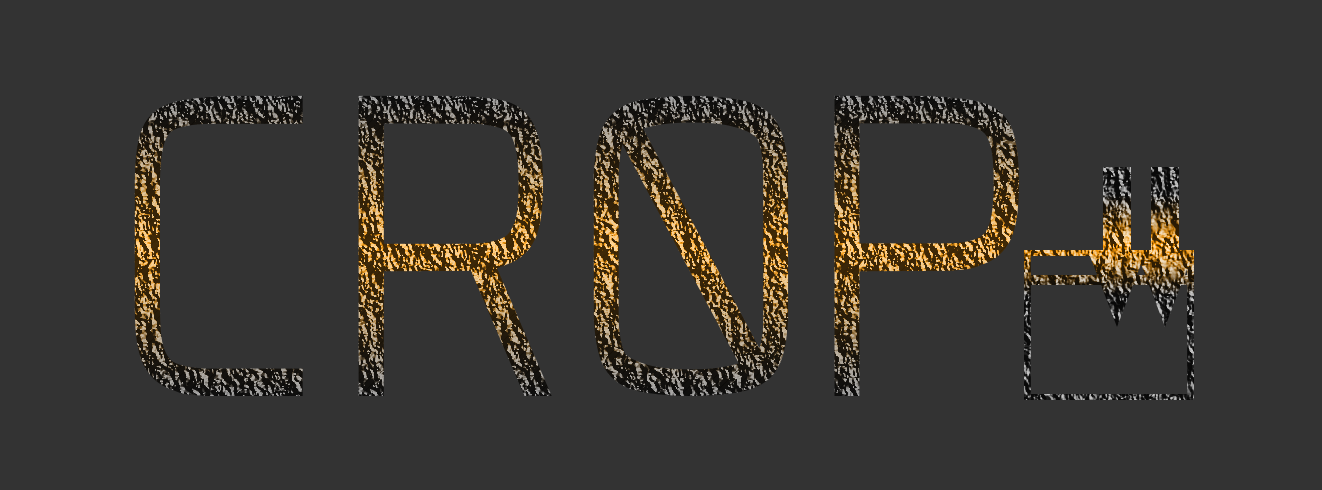
<style>
.page{position:relative;width:1322px;height:490px;background:#333333}
.page>*{position:absolute;margin:0}
.t1{font:428.7px "Exan-Regular";scale:0.92 1}
</style>
<div class="page">
<p class="t1" style="left:134px;top:95px;width:885px;height:301px">crop</p>
</div>
